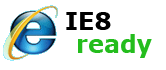
<style>
.page{position:relative;width:166px;height:70px;background:#ffffff}
.page>*{position:absolute;margin:0}
.t1{font:24px "Verdana-Bold";color:#000000}
.t2{font:24px "Verdana-Bold";color:#24bd1d}
</style>
<div class="page">
<p class="t1" style="left:66px;top:12px;width:45px;height:18px">IE8</p>
<p class="t2" style="left:78px;top:34px;width:74px;height:24px">ready</p>
</div>
